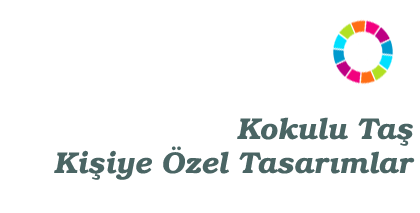
<style>
.page{position:relative;width:420px;height:213px;background:#ffffff}
.page>*{position:absolute;margin:0}
.t1{font:30px "BookmanITCbyBT-DemiItalic";color:#4a6564}
</style>
<div class="page">
<p class="t1" style="left:237px;top:117px;width:176px;height:29px">Kokulu Taş</p>
<p class="t1" style="left:54px;top:146px;width:361px;height:34px">Kişiye Özel Tasarımlar</p>
</div>
